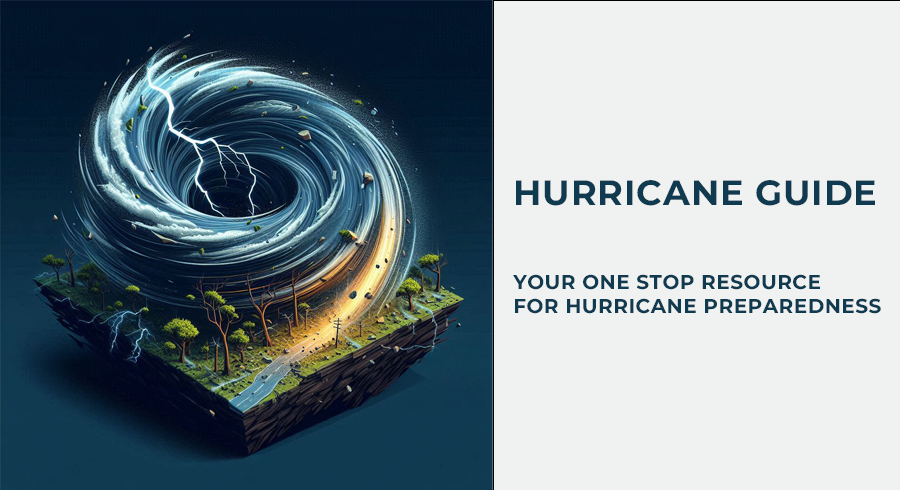
<style>
.page{position:relative;width:900px;height:490px;background:#f0f2f1}
.page>*{position:absolute;margin:0}
.t1{font:20px "MontserratThin-Bold";letter-spacing:0.025em;color:#103a50;text-transform:uppercase}
.t2{font:35px "MontserratThin-Bold";letter-spacing:0.025em;color:#103a50;text-transform:uppercase}
</style>
<div class="page">
<p class="t1" style="left:513px;top:180px;width:368px;height:134px"><span class="t2">Hurricane Guide<br><br></span>Your one stop resource<br>for hurricane preparedness</p>
</div>
